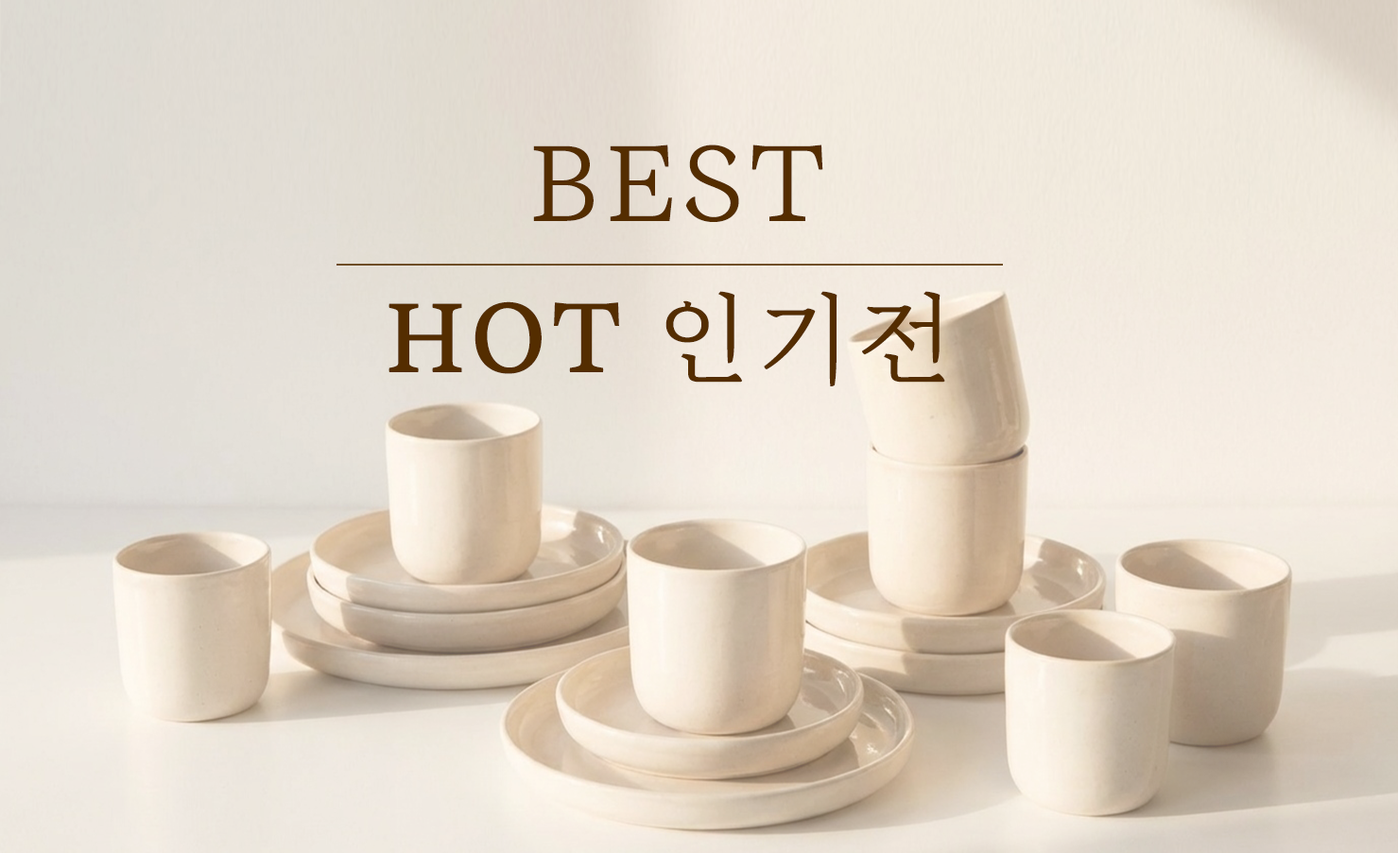
<style>
.page{position:relative;width:1398px;height:853px}
.page>*{position:absolute;margin:0}
.t1{font:113.1px "Eulyoo1945-Regular";letter-spacing:0.045em;color:#542d00}
.t2{font:101px "Eulyoo1945-SemiBold";letter-spacing:0.045em;color:#542d00}
.t3{font:101px "Eulyoo1945-Regular";letter-spacing:0.045em;color:#542d00}
</style>
<div class="page">
<p class="t1" style="left:533px;top:145px;width:290px;height:77px">BEST</p>
<p class="t2" style="left:388px;top:291px;width:557px;height:95px">HOT<span class="t3"> 인기전</span></p>
</div>
